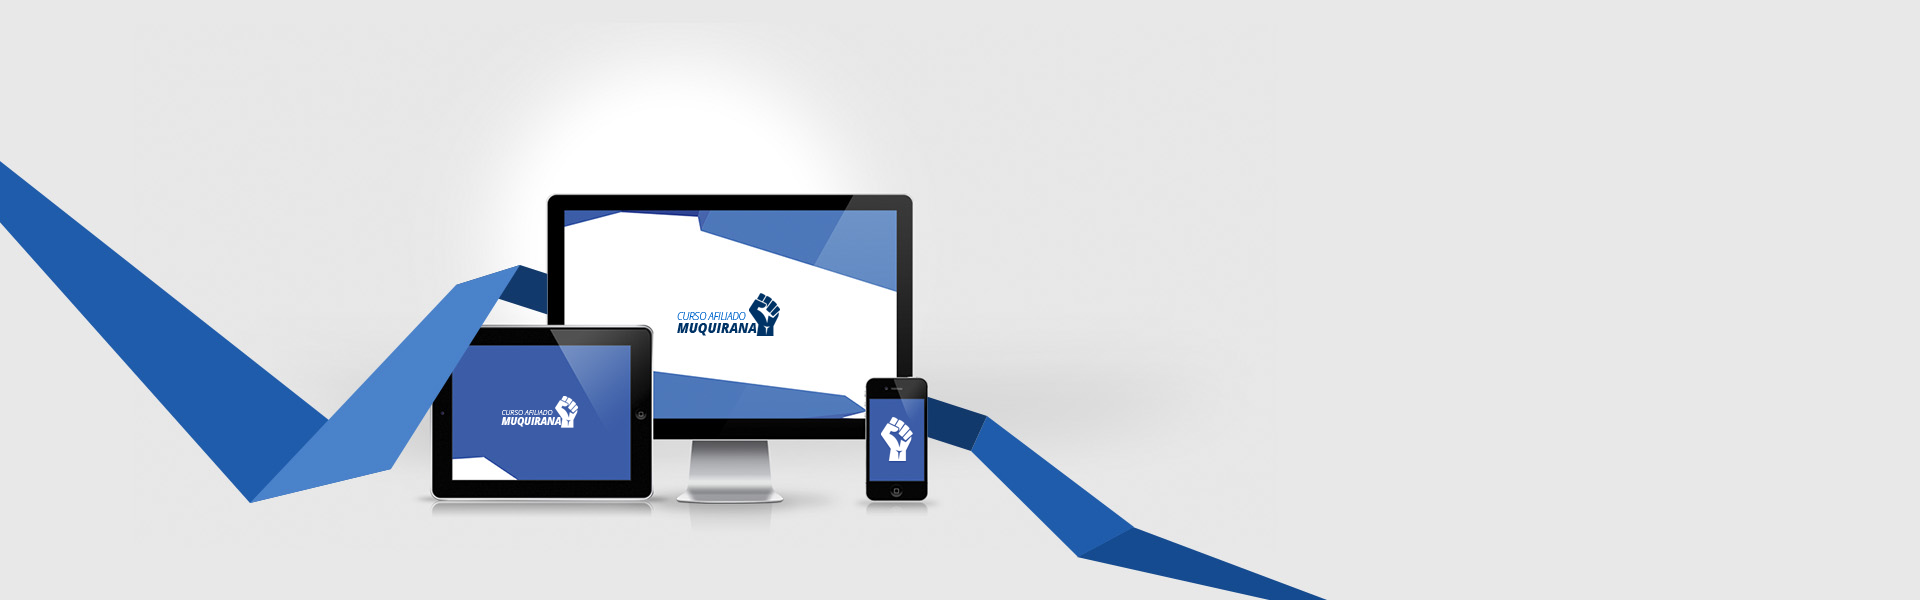
<style>
.page{position:relative;width:1920px;height:600px;background:#e8e8e8}
.page>*{position:absolute;margin:0}
.t1{font:9.6px/13.2px "OpenSansLight-Italic";color:#0066cc;text-transform:uppercase}
.t2{font:12.9px/13.2px "OpenSans-ExtraboldItalic";color:#003366;text-transform:uppercase}
.t3{font:7.2px/9.9px "OpenSansLight-Italic";color:#ffffff;text-transform:uppercase}
.t4{font:9.7px/9.9px "OpenSans-ExtraboldItalic";color:#ffffff;text-transform:uppercase}
</style>
<div class="page">
<p class="t1" style="left:677px;top:312px;width:80px;height:24px">Curso Afiliado<br><span class="t2">Muquirana</span></p>
<p class="t3" style="left:501px;top:410px;width:60px;height:17px">Curso Afiliado<br><span class="t4">Muquirana</span></p>
</div>
